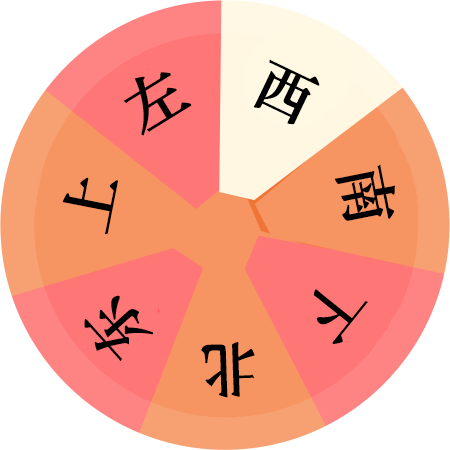
<style>
.page{position:relative;width:450px;height:450px;background:#f69562}
.page>*{position:absolute;margin:0}
.t1{font:60px "STZhongsong";color:#000000;font-weight:bold}
</style>
<div class="page">
<p class="t1" style="left:253px;top:59px;width:67px;height:66px;rotate:26deg">西</p>
<p class="t1" style="left:123px;top:72px;width:69px;height:64px;rotate:-32deg">左</p>
<p class="t1" style="left:335px;top:164px;width:60px;height:57px;rotate:79deg">南</p>
<p class="t1" style="left:62px;top:177px;width:56px;height:58px;rotate:-79deg">上</p>
<p class="t1" style="left:313px;top:289px;width:55px;height:55px;rotate:129deg">下</p>
<p class="t1" style="left:84px;top:295px;width:70px;height:66px;rotate:-132deg">东</p>
<p class="t1" style="left:201px;top:342px;width:54px;height:56px;rotate:178deg">北</p>
</div>
